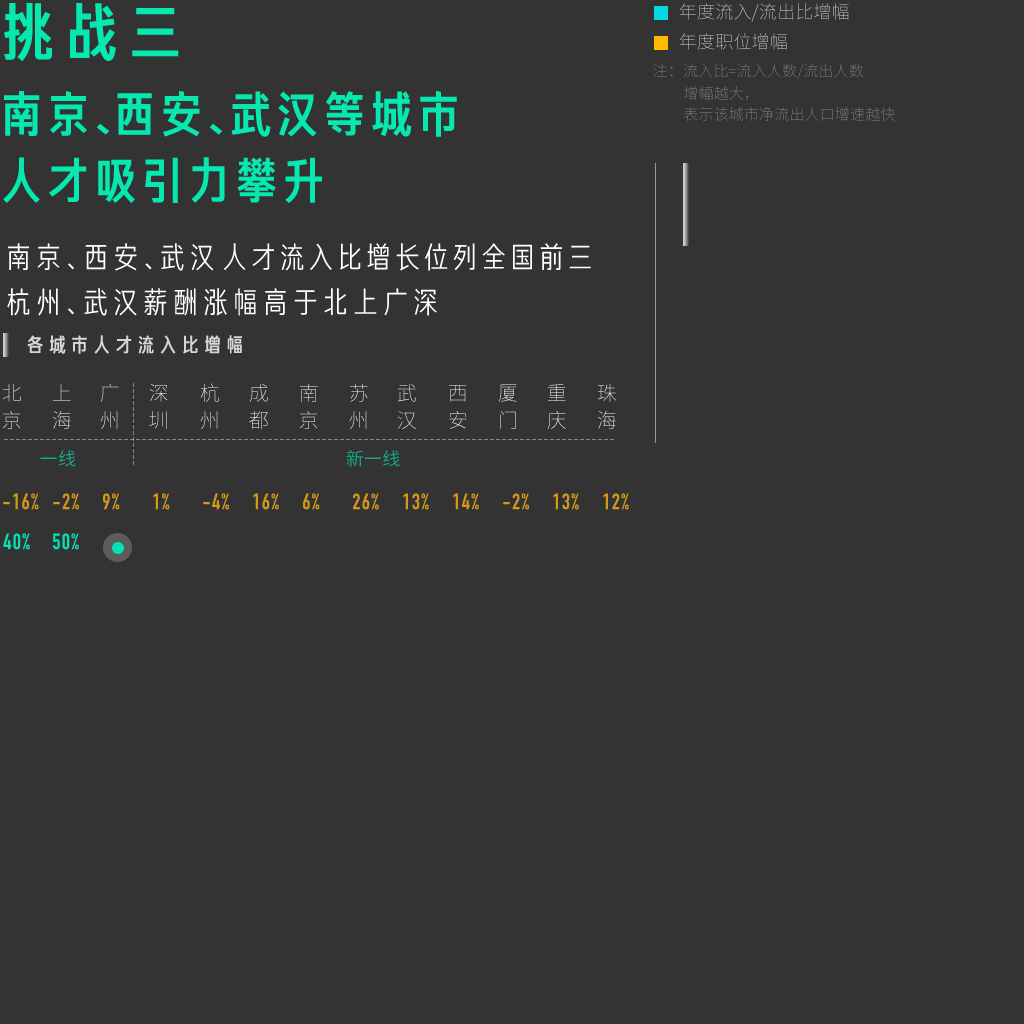
<style>
.page{position:relative;width:1024px;height:1024px;background:#333333}
.page>*{position:absolute;margin:0}
.t1{font:63.4px "FZCJHJW--GB1-0";color:#05e9b1}
.t2{font:18px "SourceHanSansCN-ExtraLight";letter-spacing:0.01em}
.t3{font:15px "SourceHanSansCN-ExtraLight";letter-spacing:0.01em;color:#858585}
.t4{font:15px/21.1px "SourceHanSansCN-ExtraLight";letter-spacing:0.01em;color:#858585}
.t5{font:50px/66.5px "FZCJHJW--GB1-0";letter-spacing:-0.06em;color:#05e9b1}
.t6{font:50px/66.5px "FZCJHJW--GB1-0";letter-spacing:-0.62em;color:#05e9b1}
.t7{font:50px/66.5px "FZCJHJW--GB1-0";letter-spacing:-0.56em;color:#05e9b1}
.t8{font:30px "FZJHJW--GB1-0";color:#ffffff}
.t9{font:30px "FZJHJW--GB1-0";letter-spacing:-0.42em;color:#ffffff}
.t10{font:30px "FZJHJW--GB1-0";letter-spacing:-0.46em;color:#ffffff}
.t11{font:30px "FZJHJW--GB1-0";letter-spacing:-0.04em;color:#ffffff}
.t12{font:30px "FZJHJW--GB1-0";letter-spacing:-0.44em;color:#ffffff}
.t13{font:20.2px "FZCJHJW--GB1-0";letter-spacing:0.1em;color:#d7d7d7}
.t14{font:20px/27.4px "SourceHanSansCN-ExtraLight";letter-spacing:0.01em}
.t15{font:20px/27.4px "SourceHanSansCN-ExtraLight";letter-spacing:0.01em;color:#ffffff}
.t16{font:18px "SourceHanSansCN-Regular";letter-spacing:0.01em;color:#16a484}
.t17{font:22px "DINCondensed-Bold";letter-spacing:0.06em;color:#d49816}
.t18{font:22px "DINCondensed-Bold";letter-spacing:0.06em;color:#05e1b6}
</style>
<div class="page">
<p class="t1" style="left:4px;top:3px;width:175px;height:58px">挑战三</p>
<p class="t2" style="left:679px;top:3px;width:170px;height:19px">年度流入/流出比增幅</p>
<p class="t2" style="left:679px;top:33px;width:108px;height:17px">年度职位增幅</p>
<p class="t3" style="left:653px;top:63px;width:211px;height:16px">注：流入比=流入人数/流出人数</p>
<p class="t4" style="left:684px;top:86px;width:211px;height:35px">增幅越大，<br>表示该城市净流出人口增速越快</p>
<p class="t5" style="left:3px;top:91px;width:454px;height:112px">南京<span class="t6">、</span>西安<span class="t7">、</span>武汉等城市<br>人才吸引力攀升</p>
<p class="t8" style="left:8px;top:243px;width:206px;height:28px">南京<span class="t9">、</span>西安<span class="t10">、</span>武汉</p>
<p class="t11" style="left:223px;top:243px;width:368px;height:28px">人才流入比增长位列全国前三</p>
<p class="t8" style="left:7px;top:288px;width:430px;height:28px">杭州<span class="t12">、</span>武汉薪酬涨幅高于北上广深</p>
<p class="t13" style="left:27px;top:335px;width:215px;height:19px">各城市人才流入比增幅</p>
<p class="t14" style="left:2px;top:384px;width:19px;height:45px">北<br>京</p>
<p class="t14" style="left:52px;top:384px;width:19px;height:45px">上<br>海</p>
<p class="t14" style="left:100px;top:383px;width:19px;height:46px">广<br>州</p>
<p class="t14" style="left:149px;top:384px;width:19px;height:45px">深<br>圳</p>
<p class="t14" style="left:200px;top:383px;width:19px;height:46px">杭<br>州</p>
<p class="t14" style="left:249px;top:383px;width:19px;height:46px">成<br>都</p>
<p class="t14" style="left:300px;top:383px;width:18px;height:46px">南<br>京</p>
<p class="t14" style="left:349px;top:383px;width:19px;height:46px">苏<br>州</p>
<p class="t15" style="left:397px;top:383px;width:19px;height:46px">武<br>汉</p>
<p class="t14" style="left:449px;top:385px;width:18px;height:44px">西<br>安</p>
<p class="t14" style="left:498px;top:384px;width:19px;height:45px">厦<br>门</p>
<p class="t14" style="left:547px;top:383px;width:19px;height:46px">重<br>庆</p>
<p class="t14" style="left:597px;top:383px;width:20px;height:46px">珠<br>海</p>
<p class="t16" style="left:40px;top:450px;width:36px;height:17px">一线</p>
<p class="t16" style="left:346px;top:450px;width:54px;height:17px">新一线</p>
<p class="t17" style="left:3px;top:493px;width:36px;height:17px">-16%</p>
<p class="t17" style="left:53px;top:493px;width:26px;height:17px">-2%</p>
<p class="t17" style="left:103px;top:493px;width:17px;height:17px">9%</p>
<p class="t17" style="left:153px;top:493px;width:17px;height:17px">1%</p>
<p class="t17" style="left:203px;top:493px;width:26px;height:17px">-4%</p>
<p class="t17" style="left:253px;top:493px;width:26px;height:17px">16%</p>
<p class="t17" style="left:303px;top:493px;width:17px;height:17px">6%</p>
<p class="t17" style="left:353px;top:493px;width:26px;height:17px">26%</p>
<p class="t17" style="left:403px;top:493px;width:26px;height:17px">13%</p>
<p class="t17" style="left:453px;top:493px;width:26px;height:17px">14%</p>
<p class="t17" style="left:503px;top:493px;width:26px;height:17px">-2%</p>
<p class="t17" style="left:553px;top:493px;width:26px;height:17px">13%</p>
<p class="t17" style="left:603px;top:493px;width:26px;height:17px">12%</p>
<p class="t18" style="left:3px;top:533px;width:27px;height:17px">40%</p>
<p class="t18" style="left:53px;top:533px;width:26px;height:17px">50%</p>
</div>
